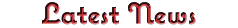
<style>
.page{position:relative;width:238px;height:28px;background:#ffffff}
.page>*{position:absolute;margin:0}
.t1{font:30px "CoquetteBold"}
</style>
<div class="page">
<p class="t1" style="left:42px;top:2px;width:154px;height:23px">Latest News</p>
<p class="t1" style="left:42px;top:2px;width:154px;height:23px">Latest News</p>
</div>
